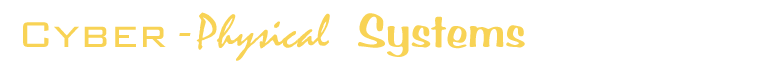
<style>
.page{position:relative;width:775px;height:70px;background:#ffffff}
.page>*{position:absolute;margin:0}
.t1{font:48px "Mistral";color:#f8d355}
.t2{font:48px "BankGothic-Light";color:#f8d355}
.t3{font:48px "OratorStd-Slanted";color:#f8d355}
.t4{font:48px "BRADDON";color:#f8d355}
</style>
<div class="page">
<p class="t1" style="left:23px;top:12px;width:502px;height:49px"><span class="t2">Cyber</span><span class="t3">-</span>Physical <span class="t4">Systems</span></p>
</div>
